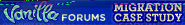
<style>
.page{position:relative;width:185px;height:25px}
.page>*{position:absolute;margin:0}
.t1{font:11px/10px "Archer-BoldLF";letter-spacing:-0.005em;font-weight:bold}
.t2{font:12px/10px "Archer-BoldLF";letter-spacing:-0.025em;font-weight:bold}
.t3{font:9.9px "GothamRounded-Bold";color:#dee7b2}
</style>
<div class="page">
<p class="t1" style="left:114px;top:2px;width:69px;height:20px;text-align:center"><span class="t2">MIGRATION<br></span>CASE STUDY</p>
<p class="t3" style="left:62px;top:14px;width:44px;height:7px">FORUMS</p>
</div>
